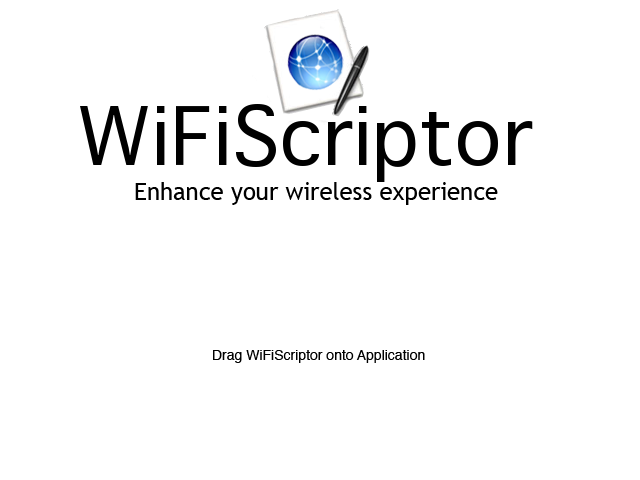
<style>
.page{position:relative;width:640px;height:480px;background:#ffffff}
.page>*{position:absolute;margin:0}
.t1{font:24px "TrebuchetMS";color:#000000}
.t2{font:14px "Helvetica";color:#000000}
</style>
<div class="page">
<p class="t1" style="left:135px;top:182px;width:363px;height:23px">Enhance your wireless experience</p>
<p class="t2" style="left:213px;top:350px;width:212px;height:13px">Drag WiFiScriptor onto Application</p>
</div>
